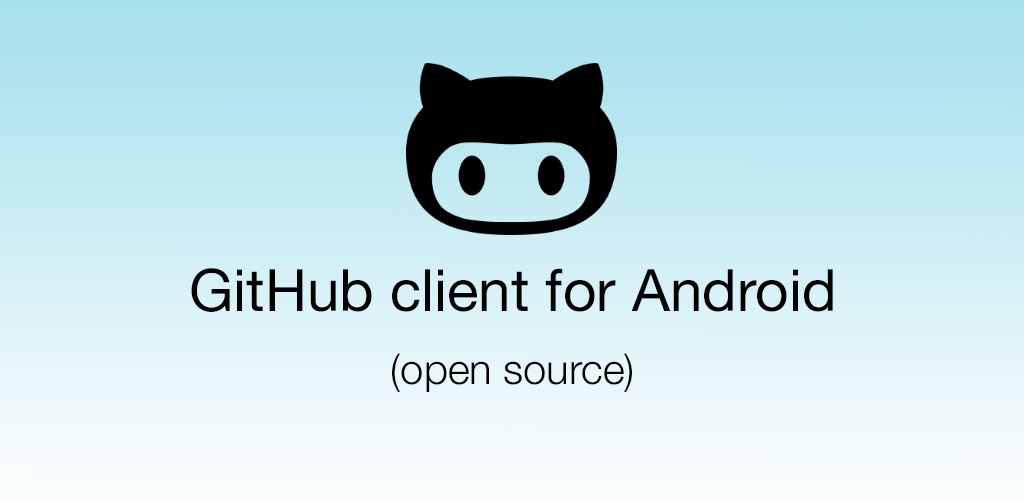
<style>
.page{position:relative;width:1024px;height:500px}
.page>*{position:absolute;margin:0}
.t1{font:58.3px "HelveticaNeue";color:#000000}
.t2{font:41.7px "HelveticaNeue-Light";color:#000000}
</style>
<div class="page">
<p class="t1" style="left:191px;top:268px;width:642px;height:44px">GitHub client for Android</p>
<p class="t2" style="left:392px;top:353px;width:240px;height:39px">(open source)</p>
</div>
